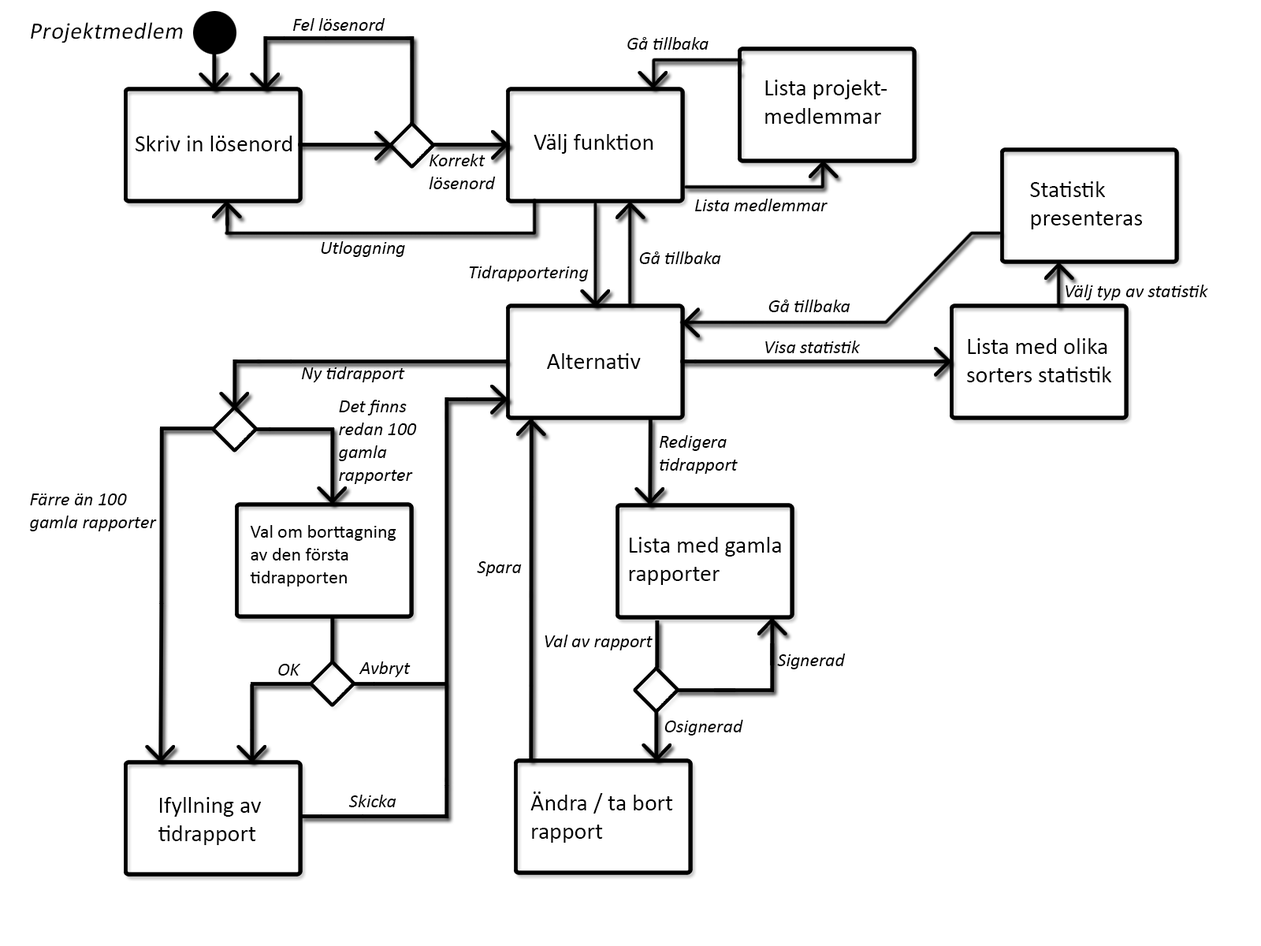
<style>
.page{position:relative;width:1261px;height:946px;background:#ffffff}
.page>*{position:absolute;margin:0}
.t1{font:23.6px "Calibri";letter-spacing:0.02em;color:#000000;font-style:italic}
.t2{font:18.9px "Calibri-Italic";color:#000000}
.t3{font:23.6px "Calibri";color:#000000}
.t4{font:18.9px "Calibri";color:#000000}
</style>
<div class="page">
<p class="t1" style="left:31px;top:22px;width:152px;height:21px">Projektmedlem</p>
<p class="t2" style="left:292px;top:18px;width:93px;height:13px">Fel lösenord</p>
<p class="t2" style="left:627px;top:37px;width:81px;height:13px">Gå tillbaka</p>
<p class="t3" style="left:765px;top:80px;width:122px;height:44px;text-align:right">Lista projekt-medlemmar</p>
<p class="t3" style="left:136px;top:136px;width:156px;height:15px">Skriv in lösenord</p>
<p class="t3" style="left:534px;top:134px;width:119px;height:20px">Välj funktion</p>
<p class="t2" style="left:429px;top:154px;width:67px;height:35px;text-align:right">Korrekt <br>lösenord</p>
<p class="t3" style="left:1030px;top:181px;width:112px;height:48px;text-align:right">Statistik  <br>presenteras</p>
<p class="t2" style="left:695px;top:199px;width:132px;height:12px">Lista medlemmar</p>
<p class="t2" style="left:321px;top:241px;width:84px;height:16px">Utloggning</p>
<p class="t2" style="left:639px;top:251px;width:82px;height:13px">Gå tillbaka</p>
<p class="t2" style="left:469px;top:266px;width:120px;height:15px">Tidrapportering</p>
<p class="t2" style="left:1065px;top:284px;width:143px;height:16px">Välj typ av statistik</p>
<p class="t2" style="left:768px;top:299px;width:82px;height:13px">Gå tillbaka</p>
<p class="t2" style="left:765px;top:340px;width:96px;height:13px">Visa statistik</p>
<p class="t3" style="left:967px;top:338px;width:144px;height:44px;text-align:right">Lista med olika sorters statistik</p>
<p class="t3" style="left:547px;top:353px;width:94px;height:16px">Alternativ</p>
<p class="t2" style="left:301px;top:366px;width:104px;height:16px">Ny tidrapport</p>
<p class="t2" style="left:339px;top:400px;width:78px;height:84px;text-align:right">Det finns redan 100 gamla <br>rapporter</p>
<p class="t2" style="left:659px;top:435px;width:79px;height:39px;text-align:right">Redigera<br>tidrapport</p>
<p class="t2" style="left:30px;top:493px;width:127px;height:38px;text-align:right">Färre än 100 <br>gamla rapporter</p>
<p class="t4" style="left:250px;top:525px;width:146px;height:61px;text-align:right">Val om borttagning <br>av den första <br>tidrapporten</p>
<p class="t3" style="left:629px;top:537px;width:152px;height:48px;text-align:right">Lista med gamla rapporter</p>
<p class="t2" style="left:477px;top:561px;width:45px;height:15px">Spara</p>
<p class="t2" style="left:545px;top:634px;width:108px;height:16px">Val av rapport</p>
<p class="t2" style="left:777px;top:653px;width:69px;height:16px">Signerad</p>
<p class="t2" style="left:278px;top:664px;width:22px;height:11px">OK</p>
<p class="t2" style="left:359px;top:661px;width:52px;height:16px">Avbryt</p>
<p class="t2" style="left:664px;top:720px;width:79px;height:15px">Osignerad</p>
<p class="t3" style="left:158px;top:797px;width:103px;height:48px;text-align:right">Ifyllning av tidrapport</p>
<p class="t2" style="left:348px;top:794px;width:48px;height:13px">Skicka</p>
<p class="t3" style="left:530px;top:791px;width:143px;height:51px;text-align:right">Ändra / ta bort rapport</p>
</div>
